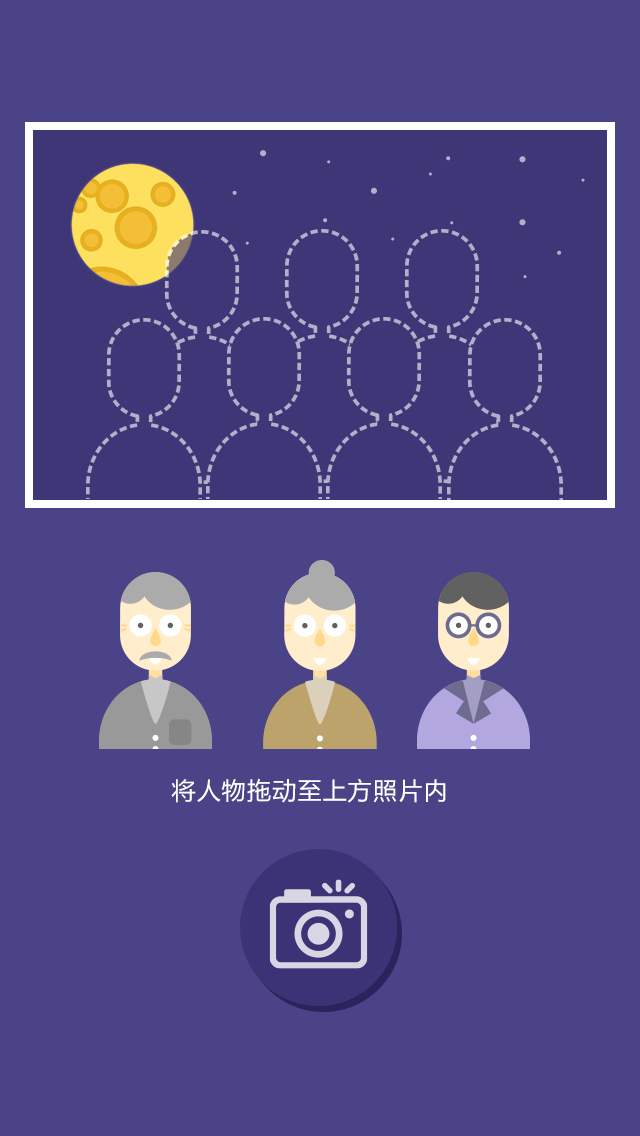
<style>
.page{position:relative;width:640px;height:1136px;background:#4b4387}
.page>*{position:absolute;margin:0}
.t1{font:24px "MicrosoftYaHei";letter-spacing:0.05em;color:#ffffff}
</style>
<div class="page">
<p class="t1" style="left:171px;top:778px;width:275px;height:25px">将人物拖动至上方照片内</p>
</div>
